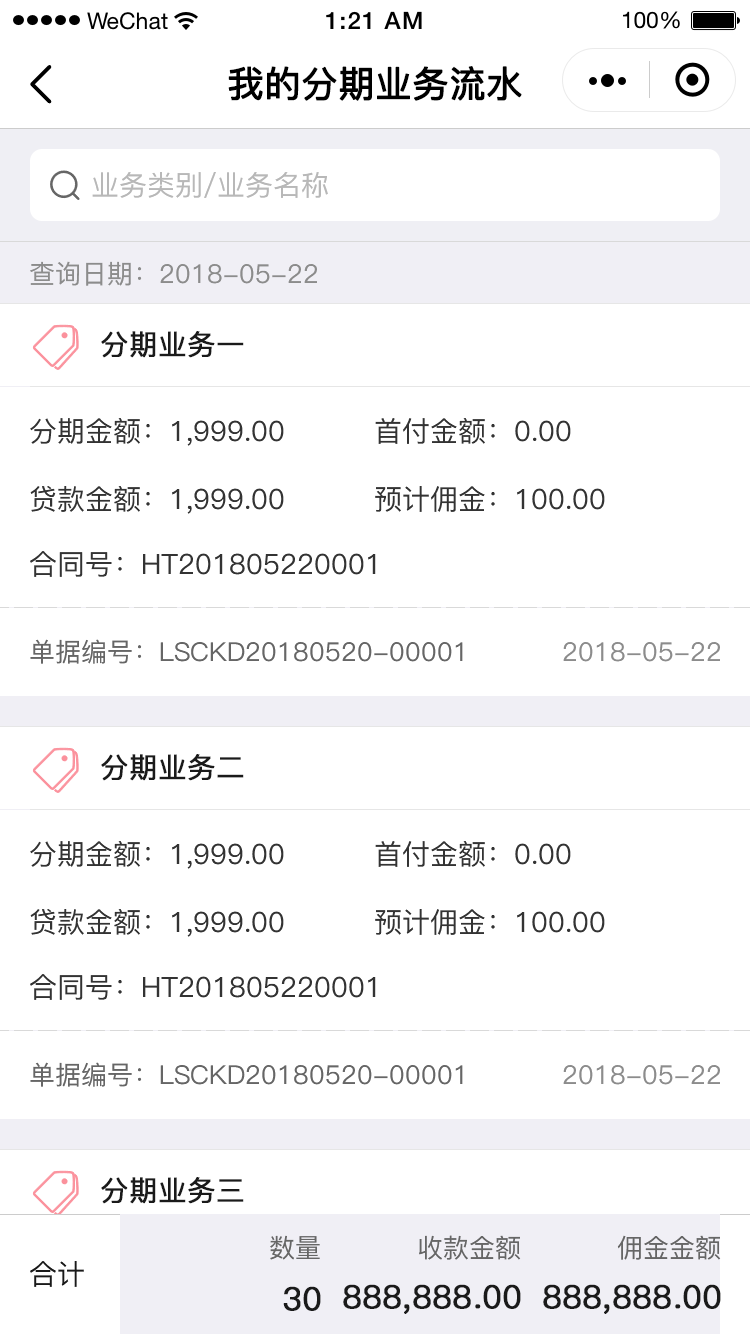
<style>
.page{position:relative;width:750px;height:1334px;background:#ffffff}
.page>*{position:absolute;margin:0}
.t1{font:36px "PingFang-SC-Medium";color:#000000;font-weight:bold}
.t2{font:28px "PingFang-SC-Medium";color:#b8b8b8}
.t3{font:26px "PingFang-SC-Medium";color:#8c8c8c}
.t4{font:28px "PingFang-SC-Medium";color:#1a1a1a;font-weight:bold}
.t5{font:28px "PingFang-SC-Medium";color:#333333}
.t6{font:26px "PingFang-SC-Medium";color:#666666}
.t7{font:28px "PingFang-SC-Medium";color:#1a1a1a}
.t8{font:32px "PingFang-SC-Medium";color:#1a1a1a;font-weight:bold}
</style>
<div class="page">
<p class="t1" style="left:228px;top:66px;width:294px;height:35px">我的分期业务流水</p>
<p class="t2" style="left:92px;top:172px;width:236px;height:26px">业务类别/业务名称</p>
<p class="t3" style="left:30px;top:261px;width:287px;height:25px">查询日期：2018-05-22</p>
<p class="t4" style="left:101px;top:331px;width:143px;height:27px">分期业务一</p>
<p class="t5" style="left:30px;top:418px;width:254px;height:28px">分期金额：1,999.00</p>
<p class="t5" style="left:375px;top:418px;width:196px;height:26px">首付金额：0.00</p>
<p class="t5" style="left:30px;top:486px;width:254px;height:28px">贷款金额：1,999.00</p>
<p class="t5" style="left:375px;top:486px;width:230px;height:26px">预计佣金：100.00</p>
<p class="t5" style="left:30px;top:551px;width:346px;height:26px">合同号：HT201805220001</p>
<p class="t6" style="left:30px;top:639px;width:433px;height:25px">单据编号：LSCKD20180520-00001</p>
<p class="t3" style="left:563px;top:642px;width:157px;height:20px">2018-05-22</p>
<p class="t4" style="left:101px;top:754px;width:143px;height:27px">分期业务二</p>
<p class="t5" style="left:30px;top:841px;width:254px;height:28px">分期金额：1,999.00</p>
<p class="t5" style="left:375px;top:841px;width:196px;height:26px">首付金额：0.00</p>
<p class="t5" style="left:30px;top:909px;width:254px;height:28px">贷款金额：1,999.00</p>
<p class="t5" style="left:375px;top:909px;width:230px;height:26px">预计佣金：100.00</p>
<p class="t5" style="left:30px;top:974px;width:346px;height:26px">合同号：HT201805220001</p>
<p class="t6" style="left:30px;top:1062px;width:433px;height:25px">单据编号：LSCKD20180520-00001</p>
<p class="t3" style="left:563px;top:1065px;width:157px;height:20px">2018-05-22</p>
<p class="t4" style="left:101px;top:1177px;width:143px;height:27px">分期业务三</p>
<p class="t6" style="left:270px;top:1235px;width:50px;height:25px">数量</p>
<p class="t6" style="left:419px;top:1235px;width:102px;height:25px">收款金额</p>
<p class="t6" style="left:617px;top:1235px;width:104px;height:25px">佣金金额</p>
<p class="t7" style="left:30px;top:1261px;width:54px;height:26px">合计</p>
<p class="t8" style="left:283px;top:1286px;width:38px;height:25px">30</p>
<p class="t8" style="left:343px;top:1284px;width:178px;height:30px">888,888.00</p>
<p class="t8" style="left:543px;top:1284px;width:178px;height:30px">888,888.00</p>
</div>
